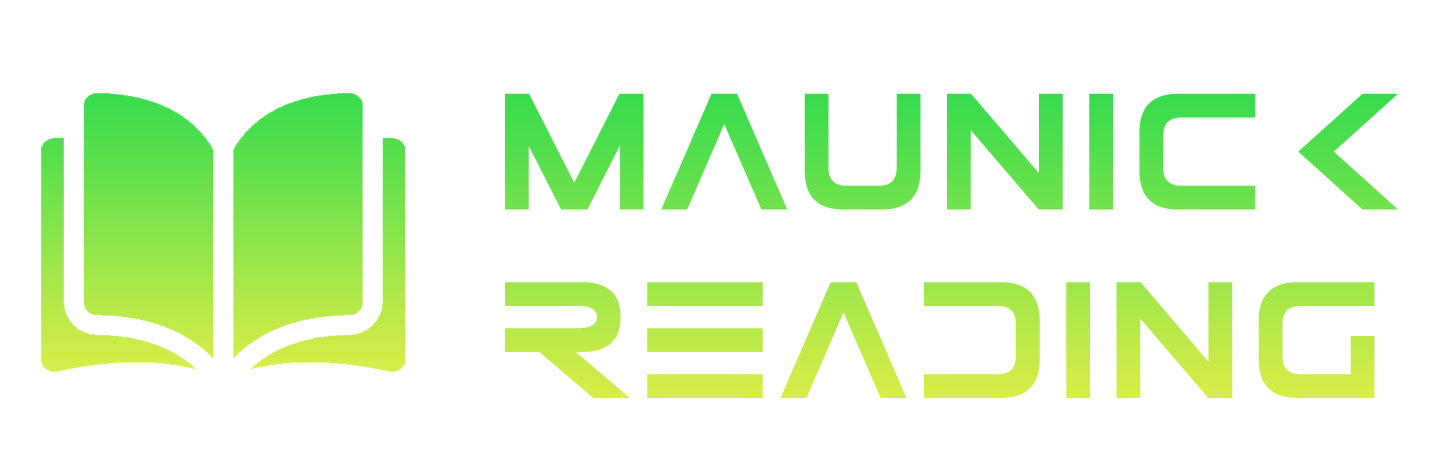
<style>
.page{position:relative;width:1441px;height:465px;background:#ffffff}
.page>*{position:absolute;margin:0}
.t1{font:157px "ElementalEnd";text-transform:uppercase;font-weight:bold}
</style>
<div class="page">
<p class="t1" style="left:505px;top:93px;width:893px;height:305px">maunick <br>reading</p>
</div>
